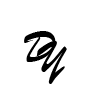
<style>
.page{position:relative;width:94px;height:94px;background:#ffffff}
.page>*{position:absolute;margin:0}
.t1{font:48px "BrushScriptMT";color:#000000}
</style>
<div class="page">
<p class="t1" style="left:24px;top:31px;width:32px;height:31px">D</p>
<p class="t1" style="left:36px;top:41px;width:31px;height:43px">Y</p>
</div>
